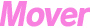
<style>
.page{position:relative;width:90px;height:28px;background:#ffffff}
.page>*{position:absolute;margin:0}
.t1{font:32px "RodinPro-EB";letter-spacing:-0.051em;color:#f880de;font-style:italic;scale:0.94 1}
</style>
<div class="page">
<p class="t1" style="left:0px;top:1px;width:91px;height:26px">Mover</p>
</div>
